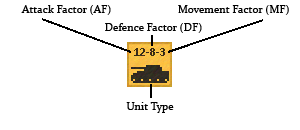
<style>
.page{position:relative;width:300px;height:130px;background:#ffffff}
.page>*{position:absolute;margin:0}
.t1{font:11px "Constantia";letter-spacing:0.01em;color:#000000}
</style>
<div class="page">
<p class="t1" style="left:21px;top:5px;width:90px;height:10px">Attack Factor (AF)</p>
<p class="t1" style="left:178px;top:5px;width:111px;height:10px">Movement Factor (MF)</p>
<p class="t1" style="left:105px;top:23px;width:97px;height:10px">Defence Factor (DF)</p>
<p class="t1" style="left:126px;top:102px;width:48px;height:11px">Unit Type</p>
</div>
